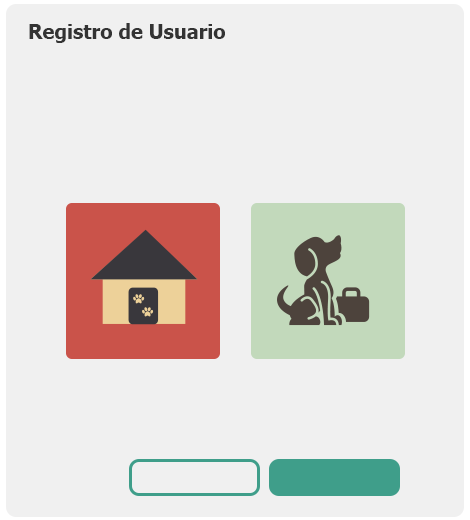
<style>
.page{position:relative;width:470px;height:520px;background:#f0f0f0}
.page>*{position:absolute;margin:0}
.t1{font:20px "Tahoma-Bold";color:#333333}
</style>
<div class="page">
<p class="t1" style="left:29px;top:23px;width:196px;height:20px">Registro de Usuario</p>
</div>
